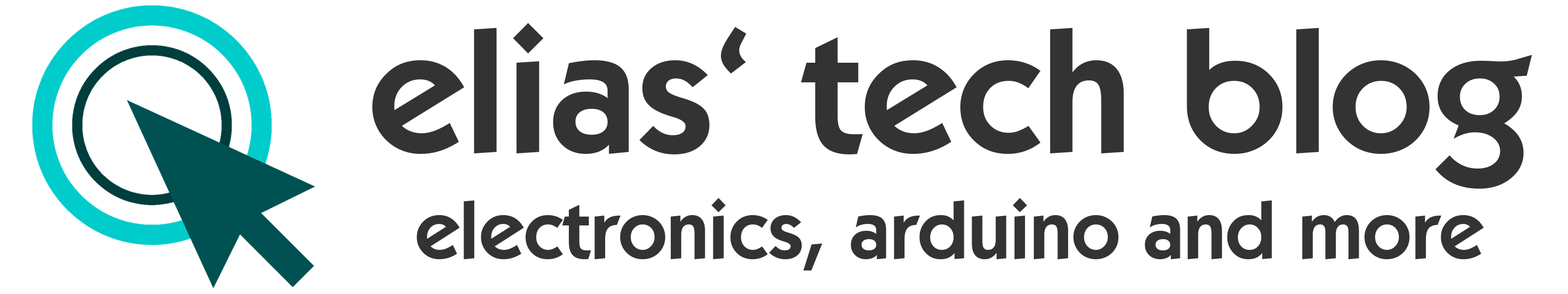
<style>
.page{position:relative;width:1568px;height:294px;background:#ffffff}
.page>*{position:absolute;margin:0}
.t1{font:81.7px/106.2px "KabelITCbyBT-Demi";color:#333333}
.t2{font:175.6px/106.2px "KabelITCbyBT-Demi";color:#333333}
</style>
<div class="page">
<p class="t1" style="left:372px;top:23px;width:1160px;height:247px;text-align:center"><span class="t2">elias‘ tech blog<br></span>electronics, arduino and more</p>
</div>
